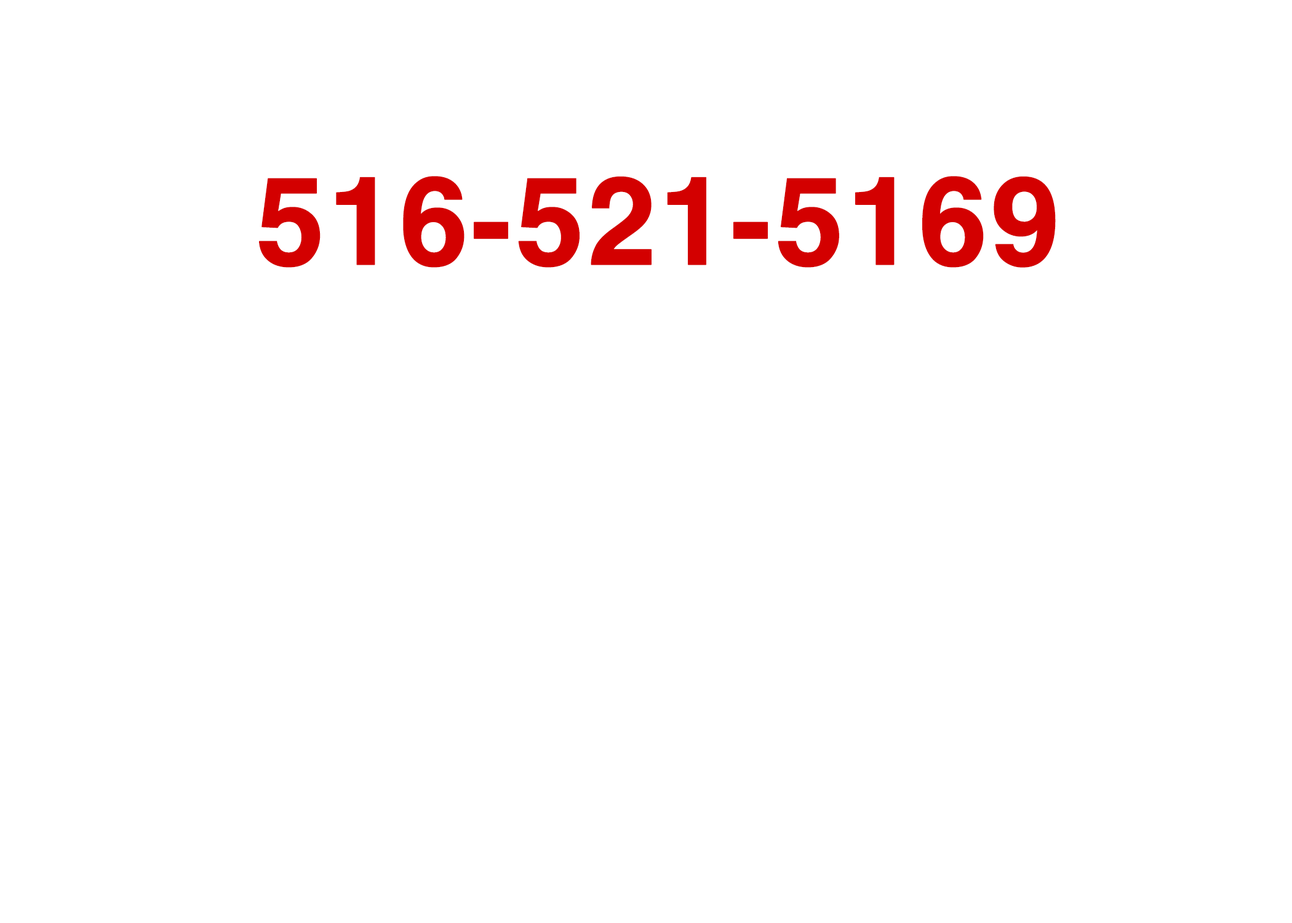
<style>
.page{position:relative;width:1292px;height:923px;background:#ffffff}
.page>*{position:absolute;margin:0}
.t1{font:123.1px "Helvetica-Bold";color:#d30000;font-weight:bold}
</style>
<div class="page">
<p class="t1" style="left:259px;top:176px;width:797px;height:92px">516-521-5169</p>
</div>
